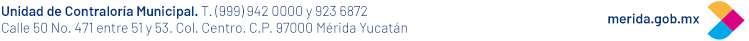
<style>
.page{position:relative;width:749px;height:41px;background:#ffffff}
.page>*{position:absolute;margin:0}
.t1{font:14px "Barlow-Light";color:#003682}
.t2{font:14px "Barlow-SemiBold";color:#003682}
</style>
<div class="page">
<p class="t1" style="left:2px;top:5px;width:405px;height:31px"><span class="t2">Unidad de Contraloría Municipal.</span> T. (999) 942 0000 y 923 6872<br>Calle 50 No. 471 entre 51 y 53. Col. Centro. C.P. 97000 Mérida Yucatán</p>
<p class="t2" style="left:608px;top:13px;width:92px;height:14px">merida.gob.mx</p>
</div>
